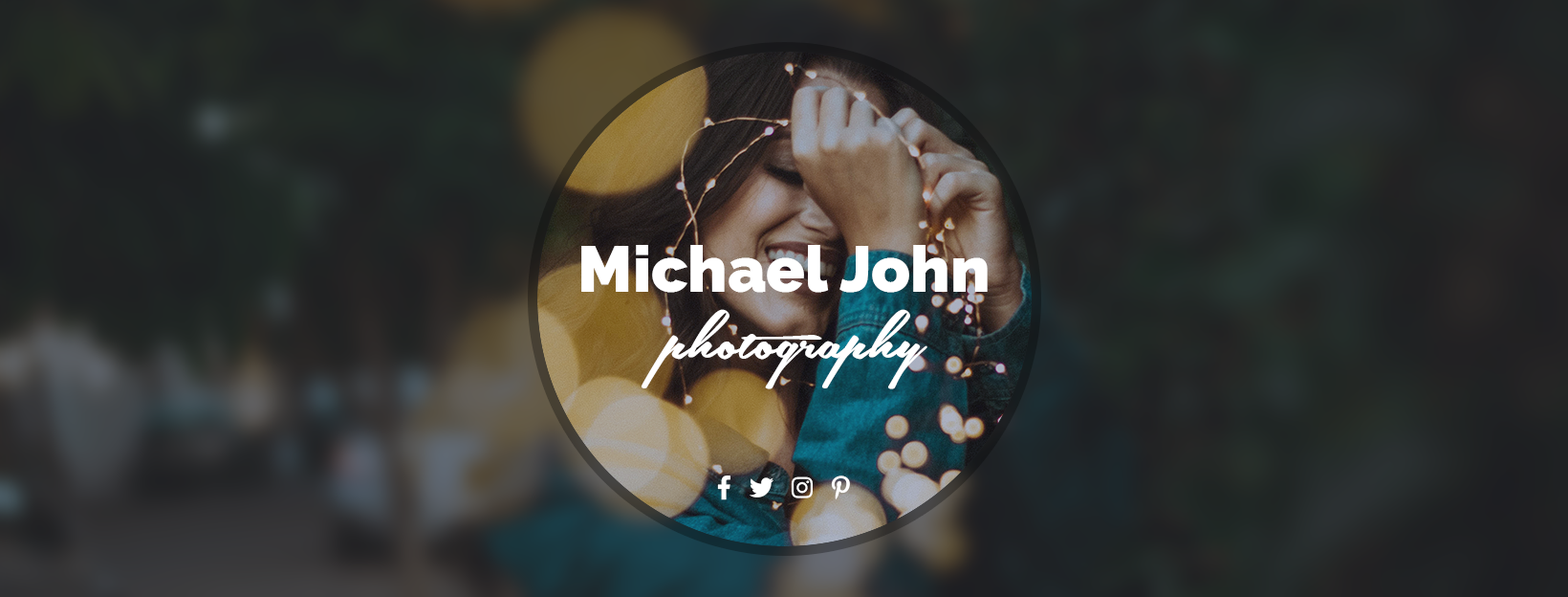
<style>
.page{position:relative;width:1568px;height:597px}
.page>*{position:absolute;margin:0}
.t1{font:64.1px "Raleway-Heavy";color:#ffffff}
.t2{font:86px "SouthernAirePersonalUseOnly";color:#ffffff}
</style>
<div class="page">
<p class="t1" style="left:581px;top:245px;width:407px;height:48px">Michael John</p>
<p class="t2" style="left:642px;top:309px;width:285px;height:80px">photography</p>
</div>
